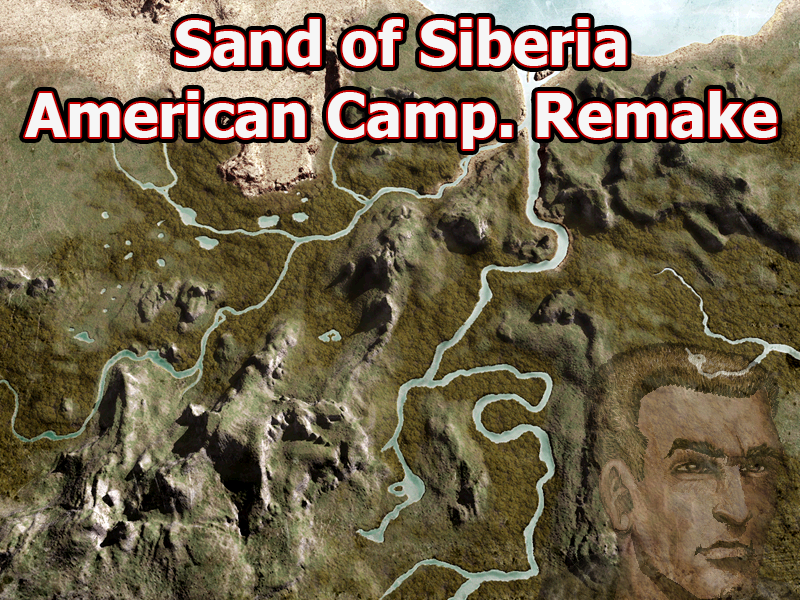
<style>
.page{position:relative;width:800px;height:600px}
.page>*{position:absolute;margin:0}
.t1{font:60px "Tahoma-Bold";color:#ffffff}
</style>
<div class="page">
<p class="t1" style="left:25px;top:19px;width:752px;height:130px;text-align:center">Sand of Siberia<br>American Camp. Remake</p>
<p class="t1" style="left:25px;top:19px;width:752px;height:130px;text-align:center">Sand of Siberia<br>American Camp. Remake</p>
</div>
